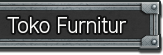
<style>
.page{position:relative;width:163px;height:55px}
.page>*{position:absolute;margin:0}
.t1{font:20px "GothicMB101Pro-Light";color:#fbfbf9;scale:0.9 1}
</style>
<div class="page">
<p class="t1" style="left:7px;top:17px;width:119px;height:16px">Toko Furnitur</p>
</div>
